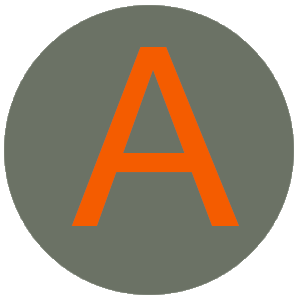
<style>
.page{position:relative;width:300px;height:300px;background:#6b7265}
.page>*{position:absolute;margin:0}
.t1{font:250px "MicrosoftSansSerif";color:#f45c00}
</style>
<div class="page">
<p class="t1" style="left:71px;top:47px;width:168px;height:179px">A</p>
</div>
